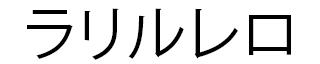
<style>
.page{position:relative;width:320px;height:64px;background:#ffffff}
.page>*{position:absolute;margin:0}
.t1{font:60px "KozGoPr6N-Regular";color:#000000}
</style>
<div class="page">
<p class="t1" style="left:27px;top:8px;width:264px;height:52px">ラリルレロ</p>
</div>
